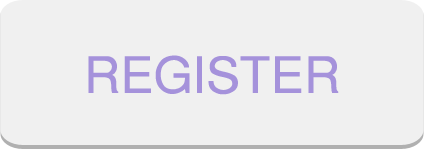
<style>
.page{position:relative;width:424px;height:149px;background:#f0f0f0}
.page>*{position:absolute;margin:0}
.t1{font:50px "Helvetica-Normal";color:#a592db}
</style>
<div class="page">
<p class="t1" style="left:88px;top:55px;width:251px;height:40px">REGISTER</p>
</div>
